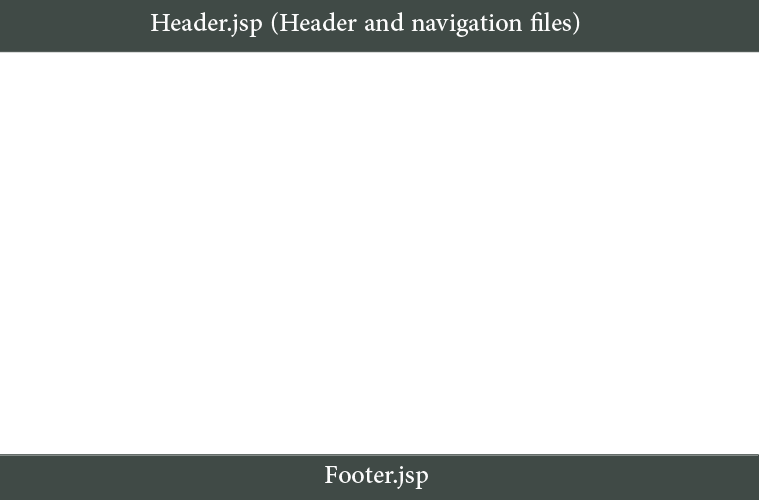
<style>
.page{position:relative;width:759px;height:500px;background:#ffffff}
.page>*{position:absolute;margin:0}
.t1{font:36px "AdobeArabic-Regular";color:#fcfcfc}
</style>
<div class="page">
<p class="t1" style="left:150px;top:12px;width:430px;height:25px">Header.jsp (Header and navigation files)</p>
<p class="t1" style="left:325px;top:466px;width:103px;height:23px">Footer.jsp</p>
</div>
